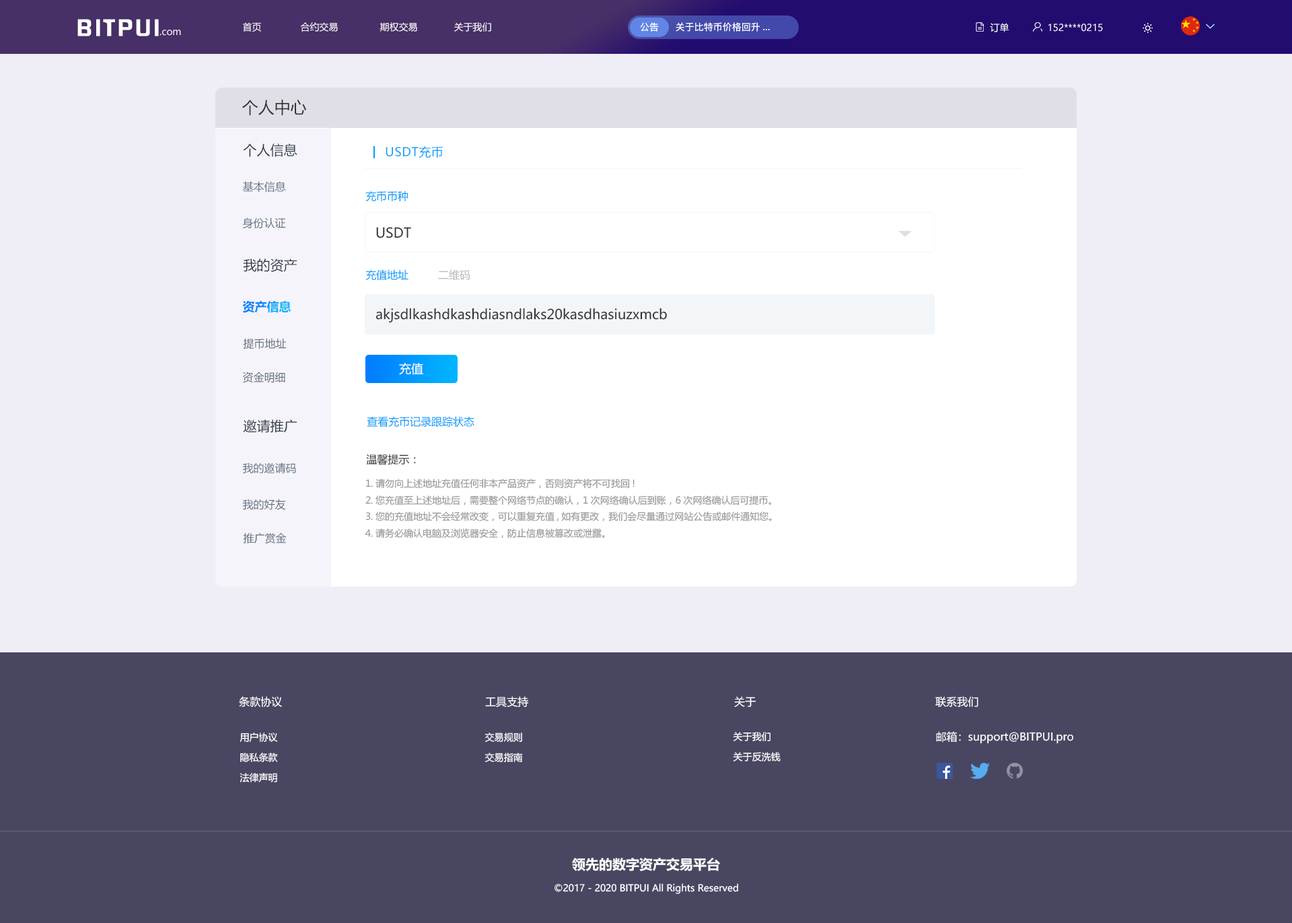
<style>
.page{position:relative;width:1292px;height:923px;background:#efeef7}
.page>*{position:absolute;margin:0}
.t1{font:20.6px "FZHZGBJW--GB1-0";letter-spacing:0.1em;color:#ffffff;scale:1.14 1}
.t2{font:9.4px "MicrosoftYaHei";color:#ffffff}
.t3{font:9.4px "PingFang-SC-Bold";color:#ffffff}
.t4{font:16.2px "MicrosoftYaHei";color:#333333}
.t5{font:13.5px "MicrosoftYaHei";color:#303b47}
.t6{font:12.1px "MicrosoftYaHei";letter-spacing:0.03em;color:#009dfa}
.t7{font:10.8px "MicrosoftYaHei";color:#637282}
.t8{font:10.8px "MicrosoftYaHei";color:#009dfa}
.t9{font:13.5px "MicrosoftYaHei";color:#333333}
.t10{font:10.8px "MicrosoftYaHei";color:#bbbbbb}
.t11{font:12.1px "MicrosoftYaHei-Bold"}
.t12{font:12.1px "MicrosoftYaHei";color:#ffffff}
.t13{font:10.8px "MicrosoftYaHei";color:#333333}
.t14{font:9.4px "MicrosoftYaHei";color:#999999}
.t15{font:10.8px "MicrosoftYaHei";color:#ffffff}
.t16{font:9.4px/20.2px "MicrosoftYaHei";color:#ffffff}
.t17{font:13.5px "MicrosoftYaHei-Bold";color:#ffffff}
</style>
<div class="page">
<p class="t1" style="left:77px;top:19px;width:82px;height:17px">BITPUI</p>
<p class="t2" style="left:160px;top:30px;width:21px;height:6px">.com</p>
<p class="t2" style="left:243px;top:22px;width:248px;height:10px">首页              合约交易               期权交易             关于我们</p>
<p class="t3" style="left:640px;top:22px;width:19px;height:10px">公告</p>
<p class="t3" style="left:676px;top:22px;width:94px;height:10px">关于比特币价格回升...</p>
<p class="t2" style="left:990px;top:23px;width:19px;height:9px">订单</p>
<p class="t2" style="left:1049px;top:24px;width:54px;height:8px">152****0215</p>
<p class="t4" style="left:242px;top:100px;width:65px;height:16px">个人中心</p>
<p class="t5" style="left:243px;top:143px;width:54px;height:14px">个人信息</p>
<p class="t6" style="left:386px;top:146px;width:57px;height:12px">USDT充币</p>
<p class="t7" style="left:242px;top:181px;width:44px;height:11px">基本信息</p>
<p class="t8" style="left:365px;top:190px;width:44px;height:12px">充币币种</p>
<p class="t7" style="left:242px;top:217px;width:44px;height:12px">身份认证</p>
<p class="t9" style="left:376px;top:227px;width:35px;height:11px">USDT</p>
<p class="t5" style="left:243px;top:258px;width:54px;height:14px">我的资产</p>
<p class="t8" style="left:365px;top:269px;width:44px;height:12px">充值地址</p>
<p class="t10" style="left:438px;top:269px;width:32px;height:11px">二维码</p>
<p class="t11" style="left:242px;top:301px;width:49px;height:12px">资产信息</p>
<p class="t9" style="left:376px;top:308px;width:291px;height:15px">akjsdlkashdkashdiasndlaks20kasdhasiuzxmcb</p>
<p class="t7" style="left:243px;top:338px;width:44px;height:11px">提币地址</p>
<p class="t12" style="left:399px;top:363px;width:24px;height:12px">充值</p>
<p class="t7" style="left:242px;top:372px;width:43px;height:11px">资金明细</p>
<p class="t5" style="left:243px;top:419px;width:54px;height:14px">邀请推广</p>
<p class="t8" style="left:367px;top:416px;width:108px;height:11px">查看充币记录跟踪状态</p>
<p class="t13" style="left:366px;top:454px;width:50px;height:11px">温馨提示：</p>
<p class="t7" style="left:242px;top:462px;width:54px;height:11px">我的邀请码</p>
<p class="t14" style="left:365px;top:479px;width:407px;height:59px">1.请勿向上述地址充值任何非本产品资产，否则资产将不可找回!<br>2.您充值至上述地址后，需要整个网络节点的确认，1次网络确认后到账，6次网络确认后可提币。<br>3.您的充值地址不会经常改变，可以重复充值,如有更改，我们会尽量通过网站公告或邮件通知您。<br>4.请务必确认电脑及浏览器安全，防止信息被篡改或泄露。</p>
<p class="t7" style="left:242px;top:499px;width:44px;height:11px">我的好友</p>
<p class="t7" style="left:243px;top:532px;width:44px;height:12px">推广赏金</p>
<p class="t15" style="left:239px;top:696px;width:43px;height:11px">条款协议</p>
<p class="t15" style="left:485px;top:696px;width:43px;height:11px">工具支持</p>
<p class="t15" style="left:734px;top:696px;width:23px;height:11px">关于</p>
<p class="t15" style="left:936px;top:696px;width:43px;height:11px">联系我们</p>
<p class="t16" style="left:240px;top:732px;width:38px;height:50px;text-align:center">用户协议<br>隐私条款<br>法律声明</p>
<p class="t16" style="left:485px;top:732px;width:38px;height:30px">交易规则<br>交易指南</p>
<p class="t16" style="left:733px;top:732px;width:48px;height:29px">关于我们<br>关于反洗钱</p>
<p class="t15" style="left:936px;top:731px;width:138px;height:13px">邮箱：support@BITPUI.pro</p>
<p class="t17" style="left:572px;top:857px;width:148px;height:14px">领先的数字资产交易平台</p>
<p class="t2" style="left:555px;top:883px;width:183px;height:11px">©2017 - 2020 BITPUI All Rights Reserved</p>
</div>
